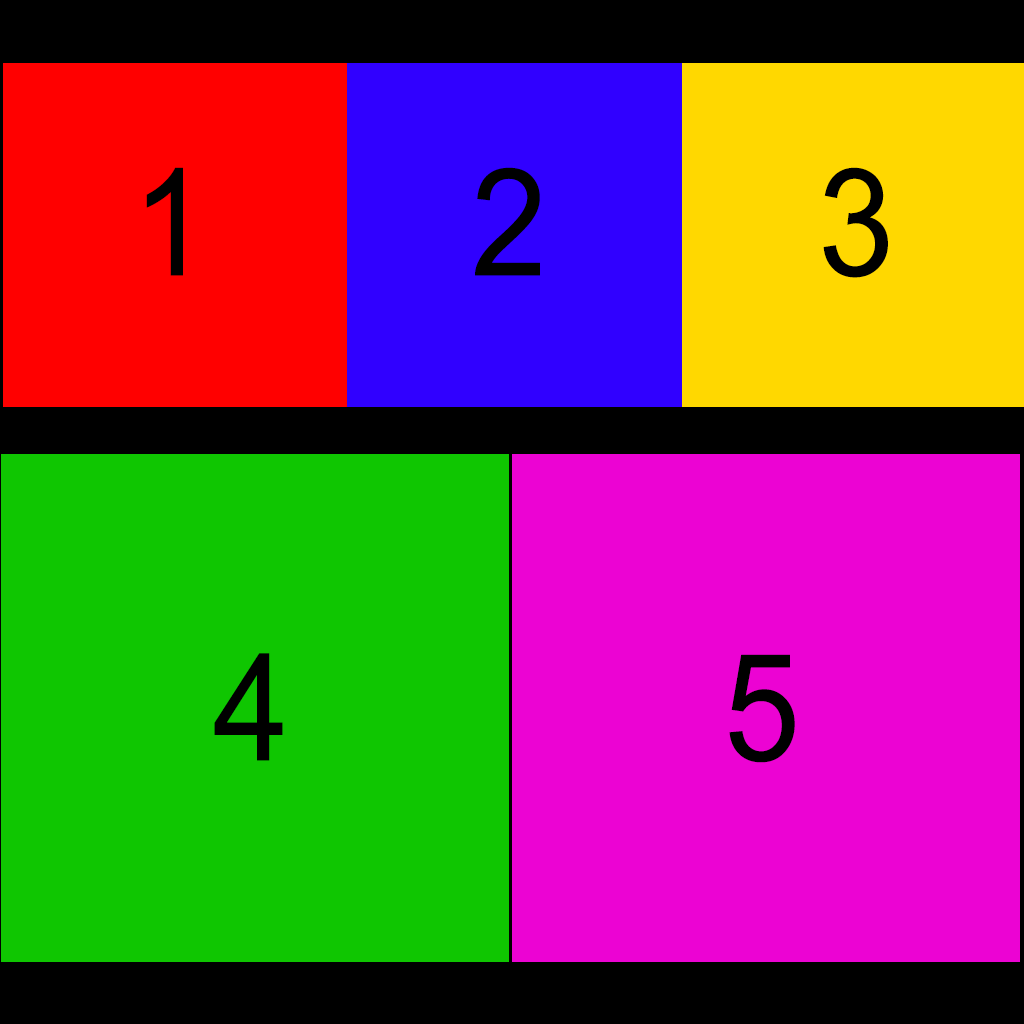
<style>
.page{position:relative;width:1024px;height:1024px;background:#ec03d3}
.page>*{position:absolute;margin:0}
.t1{font:149.6px "ArialMT";letter-spacing:0.08em;color:#000000;scale:0.91 1}
</style>
<div class="page">
<p class="t1" style="left:146px;top:167px;width:37px;height:109px">1</p>
<p class="t1" style="left:475px;top:167px;width:65px;height:109px">2</p>
<p class="t1" style="left:823px;top:167px;width:65px;height:111px">3</p>
<p class="t1" style="left:214px;top:653px;width:69px;height:108px">4</p>
<p class="t1" style="left:729px;top:654px;width:66px;height:109px">5</p>
</div>
